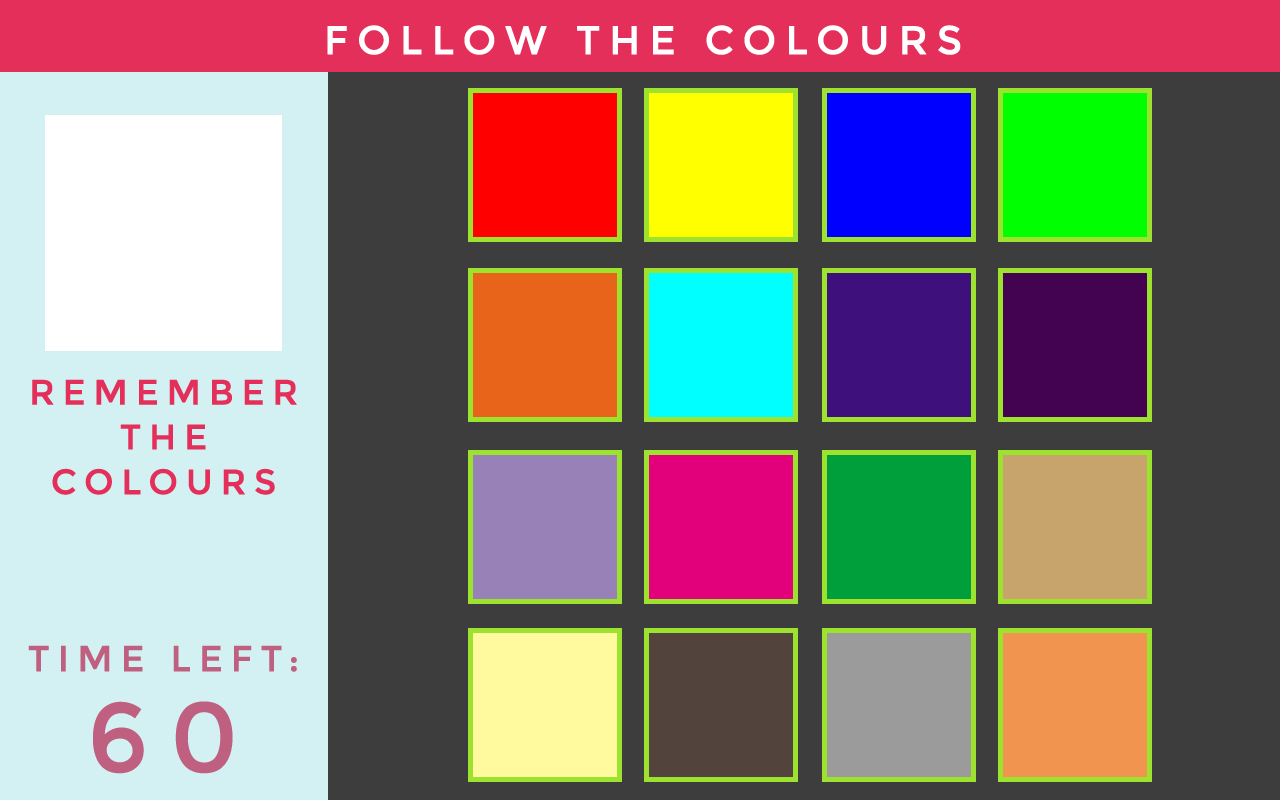
<style>
.page{position:relative;width:1280px;height:800px;background:#3d3d3d}
.page>*{position:absolute;margin:0}
.t1{font:40px "Montserrat-Regular";letter-spacing:0.2em;color:#ffffff;text-transform:uppercase;font-weight:bold}
.t2{font:35px/44.9px "Montserrat-Regular";letter-spacing:0.2em;color:#e42f5a;text-transform:uppercase;font-weight:bold}
.t3{font:36px/44.9px "Montserrat-Regular";letter-spacing:0.2em;color:#c06080;text-transform:uppercase;font-weight:bold}
.t4{font:98px/100.9px "Montserrat-Regular";letter-spacing:0.2em;color:#c06080;text-transform:uppercase;font-weight:bold}
</style>
<div class="page">
<p class="t1" style="left:327px;top:25px;width:634px;height:30px">Follow The Colours</p>
<p class="t2" style="left:32px;top:379px;width:265px;height:116px;text-align:center">Remember<br>The <br>Colours</p>
<p class="t3" style="left:28px;top:645px;width:269px;height:129px;text-align:center">Time Left:<br><span class="t4">60</span></p>
</div>
